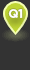
<style>
.page{position:relative;width:30px;height:70px;background:#333333}
.page>*{position:absolute;margin:0}
.t1{font:12px "Gotham-Bold";color:#ffffff}
</style>
<div class="page">
<p class="t1" style="left:8px;top:9px;width:15px;height:9px">Q1</p>
</div>
